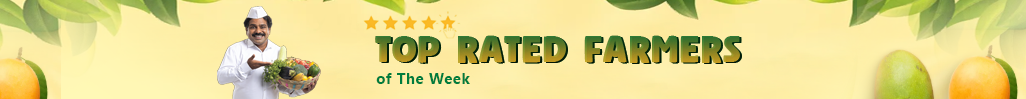
<style>
.page{position:relative;width:1026px;height:99px}
.page>*{position:absolute;margin:0}
.t1{font:42.3px "SuperCorn";letter-spacing:0.04em}
.t2{font:14.9px "SegoeUI-Bold";letter-spacing:0.04em;color:#007c3d}
</style>
<div class="page">
<p class="t1" style="left:375px;top:35px;width:365px;height:28px">TOp Rated Farmers</p>
<p class="t2" style="left:376px;top:73px;width:94px;height:11px">of The Week</p>
</div>
